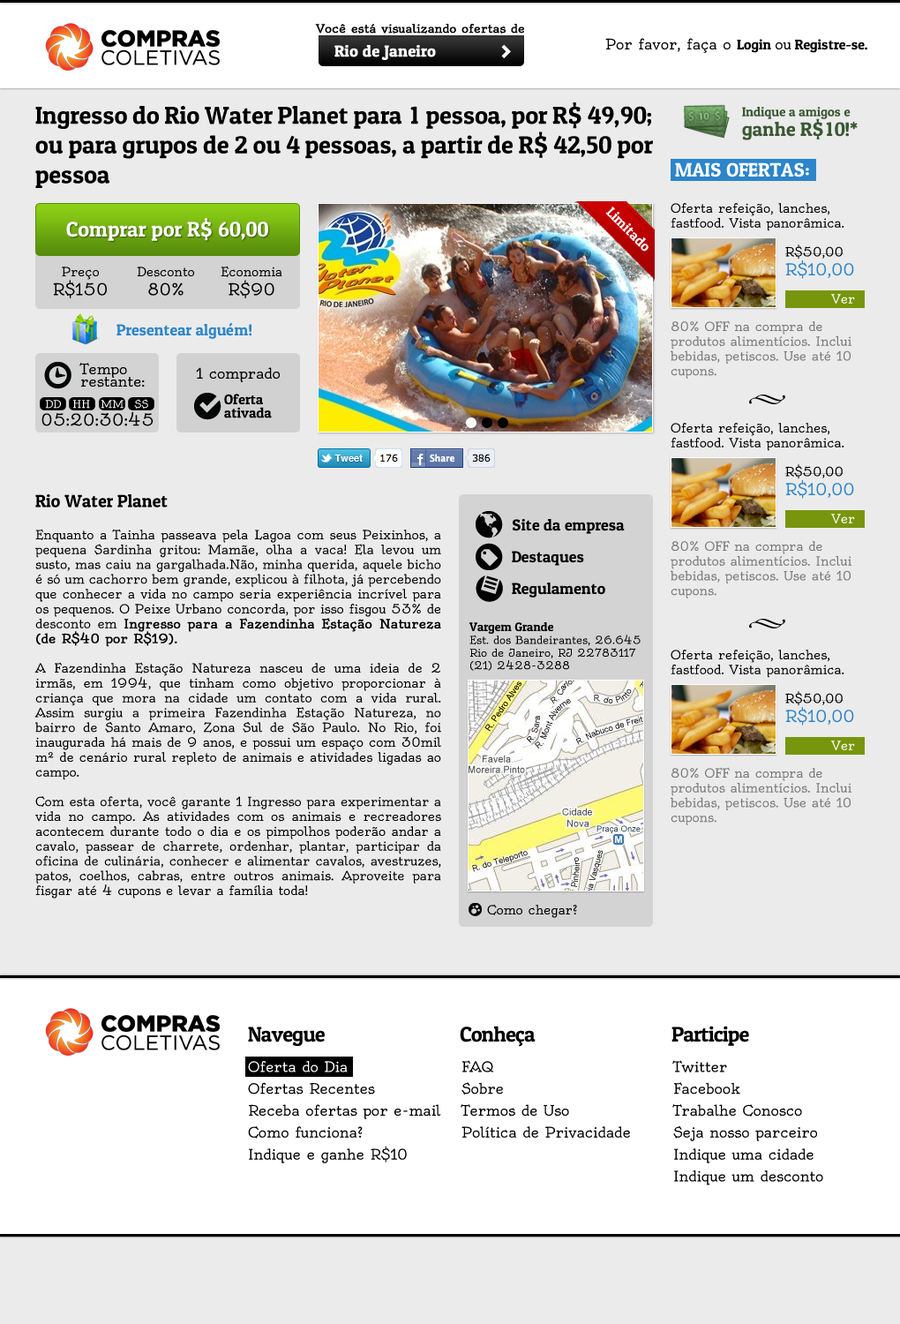
<style>
.page{position:relative;width:900px;height:1324px;background:#ebebeb}
.page>*{position:absolute;margin:0}
.t1{font:11.5px "Oldenburg-Regular";color:#000000;font-weight:bold}
.t2{font:14.1px "Oldenburg-Regular";color:#000000}
.t3{font:14.1px "PatuaOne-Regular";color:#000000}
.t4{font:15.9px "PatuaOne-Regular";color:#ffffff;font-weight:bold}
.t5{font:24.7px "PatuaOne-Regular";color:#000000}
.t6{font:13px/19.6px "PatuaOne-Regular";color:#395832}
.t7{font:19.5px/19.6px "PatuaOne-Regular";color:#395832}
.t8{font:19.4px "PatuaOne-Regular";color:#ffffff}
.t9{font:14.1px "PatuaOne-Regular";color:#ffffff}
.t10{font:12.4px "Oldenburg-Regular";color:#000000}
.t11{font:21.2px "PatuaOne-Regular";color:#ffffff}
.t12{font:15.9px "Oldenburg-Regular";color:#2c85ca}
.t13{font:15.9px "Oldenburg-Regular";color:#000000}
.t14{font:12.4px "Oldenburg-Regular";color:#ffffff}
.t15{font:15.9px "PatuaOne-Regular";color:#2c85ca}
.t16{font:12.4px "Oldenburg-Regular";color:#777777}
.t17{font:14.1px/12.4px "Oldenburg-Regular";color:#000000}
.t18{font:10.6px "Oldenburg-Regular";color:#ffffff}
.t19{font:14.1px/13.4px "PatuaOne-Regular";color:#000000}
.t20{font:17.7px "PatuaOne-Regular";color:#000000}
.t21{font:15.9px/31.8px "PatuaOne-Regular";color:#000000}
.t22{font:12.4px "Oldenburg-Regular";color:#000000;font-weight:bold}
.t23{font:10.6px "Oldenburg-Regular";color:#000000}
.t24{font:12.4px "PatuaOne-Regular";color:#000000}
.t25{font:21.2px "PatuaOne-Regular";letter-spacing:-0.03em;color:#000000}
.t26{font:14.1px/21.9px "Oldenburg-Regular";color:#000000}
.t27{font:14.1px/21.9px "Oldenburg-Regular";color:#ffffff}
</style>
<div class="page">
<p class="t1" style="left:315px;top:24px;width:209px;height:10px">Você está visualizando ofertas de</p>
<p class="t2" style="left:606px;top:38px;width:262px;height:15px">Por favor, faça o <span class="t3">Login </span>ou<span class="t3"> Registre-se.</span></p>
<p class="t4" style="left:335px;top:45px;width:101px;height:15px">Rio de Janeiro</p>
<p class="t5" style="left:35px;top:102px;width:618px;height:86px;text-align:justify">Ingresso do Rio Water Planet para 1 pessoa, por R$ 49,90; ou para grupos de 2 ou 4 pessoas, a partir de R$ 42,50 por pessoa</p>
<p class="t6" style="left:742px;top:107px;width:116px;height:33px">Indique a amigos e<br><span class="t7">ganhe R$10!*</span></p>
<p class="t8" style="left:675px;top:162px;width:135px;height:15px">MAIS OFERTAS:</p>
<p class="t9" style="left:606px;top:207px;width:43px;height:45px;rotate:45deg">Limitado</p>
<p class="t10" style="left:671px;top:203px;width:174px;height:28px">Oferta refeição, lanches, fastfood. Vista panorâmica.</p>
<p class="t11" style="left:66px;top:218px;width:202px;height:23px">Comprar por R$ 60,00</p>
<p class="t10" style="left:785px;top:245px;width:70px;height:34px">R$50,00<br><span class="t12">R$10,00</span></p>
<p class="t10" style="left:53px;top:267px;width:54px;height:31px;text-align:center">Preço<br><span class="t13">R$150</span></p>
<p class="t10" style="left:137px;top:267px;width:57px;height:29px;text-align:center">Desconto<br><span class="t13">80%</span></p>
<p class="t10" style="left:221px;top:266px;width:62px;height:32px;text-align:center">Economia<br><span class="t13">R$90</span></p>
<p class="t14" style="left:832px;top:294px;width:23px;height:10px">Ver</p>
<p class="t15" style="left:117px;top:322px;width:135px;height:17px">Presentear alguém!</p>
<p class="t16" style="left:671px;top:320px;width:182px;height:59px">80% OFF na compra de produtos alimentícios. Inclui bebidas, petiscos. Use até 10 cupons.</p>
<p class="t17" style="left:79px;top:363px;width:66px;height:25px">Tempo<br>restante:</p>
<p class="t2" style="left:196px;top:367px;width:84px;height:15px">1 comprado</p>
<p class="t18" style="left:45px;top:400px;width:16px;height:9px">DD</p>
<p class="t18" style="left:73px;top:400px;width:17px;height:9px">HH</p>
<p class="t18" style="left:101px;top:400px;width:23px;height:9px">MM</p>
<p class="t18" style="left:134px;top:399px;width:14px;height:10px">SS</p>
<p class="t19" style="left:224px;top:394px;width:48px;height:24px">Oferta<br>ativada</p>
<p class="t13" style="left:41px;top:411px;width:113px;height:15px">05:20:30:45</p>
<p class="t10" style="left:671px;top:423px;width:174px;height:28px">Oferta refeição, lanches, fastfood. Vista panorâmica.</p>
<p class="t10" style="left:785px;top:464px;width:70px;height:35px">R$50,00<br><span class="t12">R$10,00</span></p>
<p class="t20" style="left:35px;top:494px;width:133px;height:14px">Rio Water Planet</p>
<p class="t21" style="left:512px;top:519px;width:113px;height:79px">Site da empresa<br>Destaques<br>Regulamento</p>
<p class="t14" style="left:832px;top:514px;width:23px;height:10px">Ver</p>
<p class="t10" style="left:34px;top:529px;width:407px;height:370px;text-align:justify">Enquanto a Tainha passeava pela Lagoa com seus Peixinhos, a pequena Sardinha gritou: Mamãe, olha a vaca! Ela levou um susto, mas caiu na gargalhada.Não, minha querida, aquele bicho é só um cachorro bem grande, explicou à filhota, já percebendo que conhecer a vida no campo seria experiência incrível para os pequenos. O Peixe Urbano concorda, por isso fisgou 53% de desconto em <span class="t22">Ingresso para a Fazendinha Estação Natureza (de R$40 por R$19).<br></span><br>A Fazendinha Estação Natureza nasceu de uma ideia de 2 irmãs, em 1994, que tinham como objetivo proporcionar à criança que mora na cidade um contato com a vida rural. Assim surgiu a primeira Fazendinha Estação Natureza, no bairro de Santo Amaro, Zona Sul de São Paulo. No Rio, foi inaugurada há mais de 9 anos, e possui um espaço com 30mil m² de cenário rural repleto de animais e atividades ligadas ao campo.<br><br>Com esta oferta, você garante 1 Ingresso para experimentar a vida no campo. As atividades com os animais e recreadores acontecem durante todo o dia e os pimpolhos poderão andar a cavalo, passear de charrete, ordenhar, plantar, participar da oficina de culinária, conhecer e alimentar cavalos, avestruzes, patos, coelhos, cabras, entre outros animais. Aproveite para fisgar até 4 cupons e levar a família toda!</p>
<p class="t16" style="left:671px;top:540px;width:182px;height:59px">80% OFF na compra de produtos alimentícios. Inclui bebidas, petiscos. Use até 10 cupons.</p>
<p class="t23" style="left:470px;top:622px;width:171px;height:49px"><span class="t24">Vargem Grande<br></span>Est. dos Bandeirantes, 26.645<br>Rio de Janeiro, RJ 22783117<br>(21) 2428-3288</p>
<p class="t10" style="left:671px;top:650px;width:174px;height:28px">Oferta refeição, lanches, fastfood. Vista panorâmica.</p>
<p class="t10" style="left:785px;top:691px;width:70px;height:35px">R$50,00<br><span class="t12">R$10,00</span></p>
<p class="t14" style="left:832px;top:741px;width:23px;height:9px">Ver</p>
<p class="t16" style="left:671px;top:767px;width:182px;height:58px">80% OFF na compra de produtos alimentícios. Inclui bebidas, petiscos. Use até 10 cupons.</p>
<p class="t10" style="left:487px;top:905px;width:90px;height:13px">Como chegar?</p>
<p class="t25" style="left:460px;top:1026px;width:76px;height:21px">Conheça</p>
<p class="t25" style="left:672px;top:1026px;width:78px;height:20px">Participe</p>
<p class="t25" style="left:248px;top:1027px;width:77px;height:19px">Navegue</p>
<p class="t26" style="left:248px;top:1061px;width:193px;height:103px"><span class="t27">Oferta do Dia<br></span>Ofertas Recentes<br>Receba ofertas por e-mail<br>Como funciona?<br>Indique e ganhe R$10</p>
<p class="t26" style="left:461px;top:1060px;width:169px;height:78px">FAQ<br>Sobre<br>Termos de Uso<br>Política de Privacidade</p>
<p class="t26" style="left:673px;top:1060px;width:151px;height:126px">Twitter<br>Facebook<br>Trabalhe Conosco<br>Seja nosso parceiro<br>Indique uma cidade<br>Indique um desconto</p>
</div>
